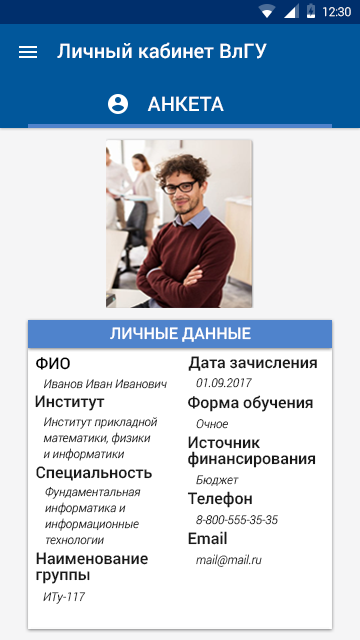
<style>
.page{position:relative;width:360px;height:640px;background:#ffffff}
.page>*{position:absolute;margin:0}
.t1{font:12px "Roboto-Light";color:#ffffff}
.t2{font:20px "Roboto-Medium";color:#ffffff}
.t3{font:16px "Roboto-Medium";color:#ffffff}
.t4{font:16px "Roboto-Medium";color:#000000}
.t5{font:16px "Roboto-Medium";color:#191919}
.t6{font:12px "Roboto-LightItalic"}
.t7{font:12px/16px "Roboto-LightItalic";color:#000000}
.t8{font:16px/16px "Roboto-Medium";color:#191919}
</style>
<div class="page">
<p class="t1" style="left:323px;top:7px;width:28px;height:10px">12:30</p>
<p class="t2" style="left:57px;top:42px;width:210px;height:17px">Личный кабинет ВлГУ</p>
<p class="t2" style="left:147px;top:96px;width:77px;height:15px">АНКЕТА</p>
<p class="t3" style="left:110px;top:327px;width:141px;height:15px">ЛИЧНЫЕ ДАННЫЕ</p>
<p class="t4" style="left:36px;top:357px;width:34px;height:13px">ФИО</p>
<p class="t5" style="left:188px;top:356px;width:129px;height:15px">Дата зачисления</p>
<p class="t6" style="left:44px;top:379px;width:123px;height:10px">Иванов Иван Иванович</p>
<p class="t6" style="left:196px;top:378px;width:56px;height:10px">01.09.2017</p>
<p class="t5" style="left:35px;top:395px;width:70px;height:16px">Институт</p>
<p class="t5" style="left:188px;top:395px;width:125px;height:17px">Форма обучения</p>
<p class="t7" style="left:43px;top:417px;width:114px;height:44px">Институт прикладной<br>математики, физики<br>и информатики</p>
<p class="t6" style="left:196px;top:419px;width:32px;height:10px">Очное</p>
<p class="t8" style="left:188px;top:436px;width:128px;height:32px">Источник<br>финансирования</p>
<p class="t5" style="left:36px;top:466px;width:116px;height:15px">Специальность</p>
<p class="t7" style="left:45px;top:486px;width:96px;height:59px">Фундаментальная <br>информатика и<br>информационные<br>технологии</p>
<p class="t6" style="left:196px;top:475px;width:43px;height:11px">Бюджет</p>
<p class="t5" style="left:187px;top:491px;width:65px;height:17px">Телефон</p>
<p class="t6" style="left:196px;top:515px;width:82px;height:10px">8-800-555-35-35</p>
<p class="t5" style="left:188px;top:531px;width:39px;height:14px">Email</p>
<p class="t8" style="left:36px;top:552px;width:112px;height:32px">Наименование <br>группы</p>
<p class="t6" style="left:196px;top:554px;width:66px;height:13px">mail@mail.ru</p>
<p class="t6" style="left:43px;top:592px;width:43px;height:12px">ИТу-117</p>
</div>
